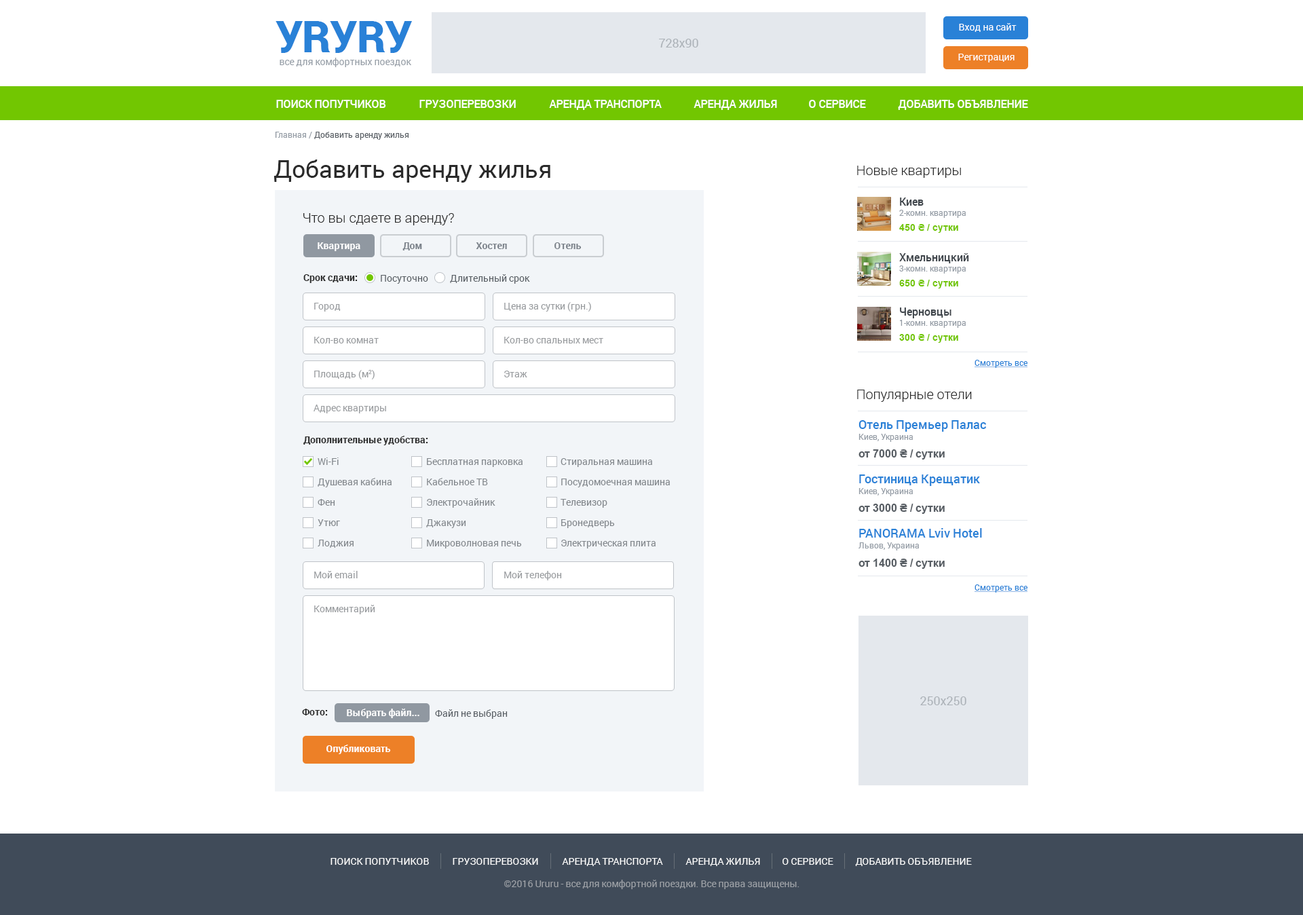
<style>
.page{position:relative;width:1303px;height:915px;background:#ffffff}
.page>*{position:absolute;margin:0}
.t1{font:43.4px "Roboto-Black";letter-spacing:-0.01em;color:#2981d7}
.t2{font:9.5px "Roboto-Regular";color:#ffffff}
.t3{font:12.2px "Roboto-Regular";color:#acb2b8}
.t4{font:9.5px "Roboto-Regular";color:#949ca5}
.t5{font:10.9px "Roboto-Medium";color:#ffffff;text-transform:uppercase}
.t6{font:8.1px "Roboto-Regular";color:#585e64}
.t7{font:8.1px "Roboto-Regular";color:#949ca5}
.t8{font:24.4px "Roboto-Regular";color:#2a2a2a}
.t9{font:13.6px "Roboto-Light";color:#2a2a2a}
.t10{font:10.9px "Roboto-Medium";color:#3f454b}
.t11{font:9.5px "Arial-BoldMT";color:#72c601}
.t12{font:9.5px "Roboto-Bold";color:#ffffff}
.t13{font:9.5px "Roboto-Bold";color:#7c838b}
.t14{font:9.5px "Roboto-Bold";color:#2a2a2a}
.t15{font:9.5px "Roboto-Regular";color:#585e64}
.t16{font:9.5px "Roboto-Regular";color:#989b9e}
.t17{font:8.1px "Roboto-Regular";color:#2981d7;text-decoration:underline}
.t18{font:12.2px "Roboto-Medium";color:#2981d7}
.t19{font:10.9px "Arial-BoldMT";color:#585e64}
.t20{font:9.5px/20.4px "Roboto-Regular";color:#81868b}
.t21{font:9.5px "Roboto-Regular";color:#ffffff;text-transform:uppercase}
.t22{font:9.5px "Roboto-Regular";color:#9ca0a6}
</style>
<div class="page">
<p class="t1" style="left:276px;top:21px;width:136px;height:32px">УRУRУ</p>
<p class="t2" style="left:959px;top:23px;width:58px;height:9px">Вход на сайт</p>
<p class="t3" style="left:659px;top:39px;width:39px;height:9px">728x90</p>
<p class="t2" style="left:958px;top:54px;width:57px;height:8px">Регистрация</p>
<p class="t4" style="left:280px;top:58px;width:131px;height:9px">все для комфортных поездок</p>
<p class="t5" style="left:276px;top:100px;width:110px;height:8px">Поиск попутчиков</p>
<p class="t5" style="left:419px;top:100px;width:97px;height:8px">грузоперевозки</p>
<p class="t5" style="left:549px;top:100px;width:113px;height:10px">Аренда транспорта</p>
<p class="t5" style="left:694px;top:100px;width:83px;height:10px">Аренда жилья</p>
<p class="t5" style="left:809px;top:100px;width:57px;height:8px">о сервисе</p>
<p class="t5" style="left:898px;top:100px;width:130px;height:10px">добавить объявление</p>
<p class="t6" style="left:275px;top:132px;width:134px;height:8px"><span class="t7">Главная /</span> Добавить аренду жилья</p>
<p class="t8" style="left:274px;top:160px;width:276px;height:23px">Добавить аренду жилья</p>
<p class="t9" style="left:857px;top:166px;width:104px;height:12px">Новые квартиры</p>
<p class="t10" style="left:900px;top:198px;width:24px;height:8px">Киев</p>
<p class="t7" style="left:899px;top:210px;width:67px;height:8px">2-комн. квартира</p>
<p class="t9" style="left:303px;top:213px;width:151px;height:12px">Что вы сдаете в аренду?</p>
<p class="t11" style="left:899px;top:224px;width:59px;height:9px">450 ₴ / сутки</p>
<p class="t12" style="left:318px;top:242px;width:42px;height:9px">Квартира</p>
<p class="t13" style="left:403px;top:242px;width:19px;height:8px">Дом</p>
<p class="t13" style="left:476px;top:242px;width:31px;height:7px">Хостел</p>
<p class="t13" style="left:555px;top:242px;width:27px;height:7px">Отель</p>
<p class="t10" style="left:899px;top:253px;width:70px;height:10px">Хмельницкий</p>
<p class="t7" style="left:899px;top:265px;width:67px;height:9px">3-комн. квартира</p>
<p class="t14" style="left:303px;top:274px;width:55px;height:9px">Срок сдачи:</p>
<p class="t15" style="left:381px;top:275px;width:47px;height:9px">Посуточно</p>
<p class="t15" style="left:450px;top:274px;width:80px;height:10px">Длительный срок</p>
<p class="t11" style="left:899px;top:280px;width:59px;height:8px">650 ₴ / сутки</p>
<p class="t16" style="left:314px;top:303px;width:27px;height:9px">Город</p>
<p class="t16" style="left:504px;top:302px;width:87px;height:10px">Цена за сутки (грн.)</p>
<p class="t10" style="left:900px;top:307px;width:52px;height:11px">Черновцы</p>
<p class="t7" style="left:900px;top:320px;width:66px;height:8px">1-комн. квартира</p>
<p class="t16" style="left:314px;top:337px;width:65px;height:6px">Кол-во комнат</p>
<p class="t16" style="left:504px;top:337px;width:99px;height:6px">Кол-во спальных мест</p>
<p class="t11" style="left:899px;top:334px;width:59px;height:9px">300 ₴ / сутки</p>
<p class="t17" style="left:975px;top:360px;width:53px;height:8px">Смотреть все</p>
<p class="t16" style="left:314px;top:369px;width:61px;height:10px">Площадь (м2)</p>
<p class="t16" style="left:504px;top:371px;width:23px;height:6px">Этаж</p>
<p class="t9" style="left:857px;top:390px;width:115px;height:12px">Популярные отели</p>
<p class="t16" style="left:314px;top:405px;width:72px;height:8px">Адрес квартиры</p>
<p class="t18" style="left:859px;top:420px;width:127px;height:12px">Отель Премьер Палас</p>
<p class="t14" style="left:303px;top:436px;width:125px;height:9px">Дополнительные удобства:</p>
<p class="t7" style="left:859px;top:434px;width:54px;height:8px">Киев, Украина</p>
<p class="t19" style="left:859px;top:449px;width:86px;height:11px">от 7000 ₴ / сутки</p>
<p class="t20" style="left:318px;top:457px;width:74px;height:91px">Wi-Fi<br>Душевая кабина<br>Фен<br>Утюг<br>Лоджия</p>
<p class="t20" style="left:426px;top:458px;width:97px;height:90px">Бесплатная парковка<br>Кабельное ТВ<br>Электрочайник<br>Джакузи<br>Микроволновая печь</p>
<p class="t20" style="left:561px;top:458px;width:109px;height:90px">Стиральная машина<br>Посудомоечная машина<br>Телевизор<br>Бронедверь<br>Электрическая плита</p>
<p class="t18" style="left:859px;top:474px;width:121px;height:12px">Гостиница Крещатик</p>
<p class="t7" style="left:859px;top:488px;width:54px;height:8px">Киев, Украина</p>
<p class="t19" style="left:859px;top:504px;width:86px;height:10px">от 3000 ₴ / сутки</p>
<p class="t18" style="left:859px;top:528px;width:123px;height:10px">PANORAMA Lviv Hotel</p>
<p class="t7" style="left:859px;top:542px;width:60px;height:8px">Львов, Украина</p>
<p class="t19" style="left:859px;top:559px;width:86px;height:10px">от 1400 ₴ / сутки</p>
<p class="t16" style="left:314px;top:571px;width:44px;height:7px">Мой email</p>
<p class="t16" style="left:504px;top:571px;width:58px;height:9px">Мой телефон</p>
<p class="t17" style="left:975px;top:584px;width:53px;height:9px">Смотреть все</p>
<p class="t16" style="left:314px;top:605px;width:61px;height:9px">Комментарий</p>
<p class="t3" style="left:920px;top:696px;width:47px;height:9px">250х250</p>
<p class="t14" style="left:302px;top:709px;width:26px;height:6px">Фото:</p>
<p class="t12" style="left:347px;top:709px;width:72px;height:9px">Выбрать файл...</p>
<p class="t15" style="left:435px;top:709px;width:73px;height:10px">Файл не выбран</p>
<p class="t12" style="left:326px;top:745px;width:65px;height:9px">Опубликовать</p>
<p class="t21" style="left:331px;top:858px;width:98px;height:7px">Поиск попутчиков</p>
<p class="t21" style="left:453px;top:858px;width:85px;height:7px">грузоперевозки</p>
<p class="t21" style="left:562px;top:858px;width:101px;height:8px">Аренда транспорта</p>
<p class="t21" style="left:686px;top:858px;width:74px;height:8px">Аренда жилья</p>
<p class="t21" style="left:783px;top:858px;width:51px;height:7px">о сервисе</p>
<p class="t21" style="left:855px;top:858px;width:117px;height:8px">добавить объявление</p>
<p class="t22" style="left:504px;top:880px;width:296px;height:9px">©2016 Ururu - все для комфортной поездки. Все права защищены.</p>
</div>
